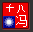
<style>
.page{position:relative;width:33px;height:32px;background:#f20000}
.page>*{position:absolute;margin:0}
.t1{font:10.4px "SimSun";color:#ffffff}
.t2{font:11.7px "SimSun";color:#ffffff}
</style>
<div class="page">
<p class="t1" style="left:6px;top:4px;width:19px;height:9px">十八</p>
<p class="t2" style="left:16px;top:15px;width:11px;height:12px">冯</p>
</div>
